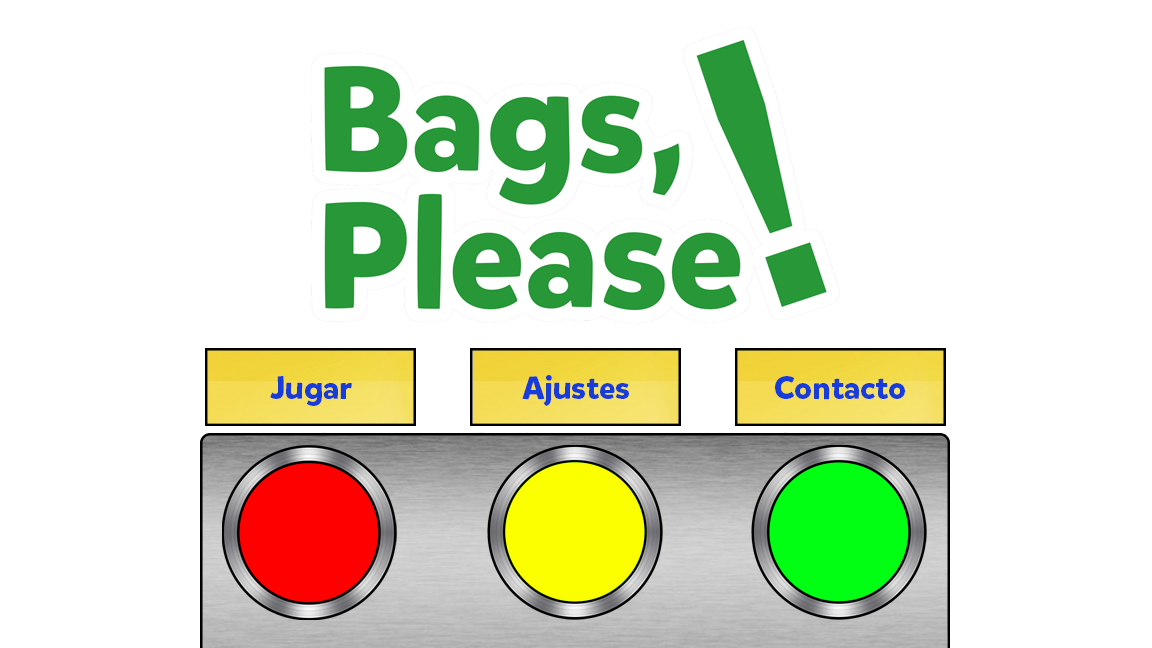
<style>
.page{position:relative;width:1152px;height:648px;background:#ffffff}
.page>*{position:absolute;margin:0}
.t1{font:32px "MikadoBoldDEMO";color:#173cd9}
</style>
<div class="page">
<p class="t1" style="left:270px;top:376px;width:82px;height:30px">Jugar</p>
<p class="t1" style="left:522px;top:375px;width:107px;height:31px">Ajustes</p>
<p class="t1" style="left:775px;top:376px;width:130px;height:24px">Contacto</p>
</div>
